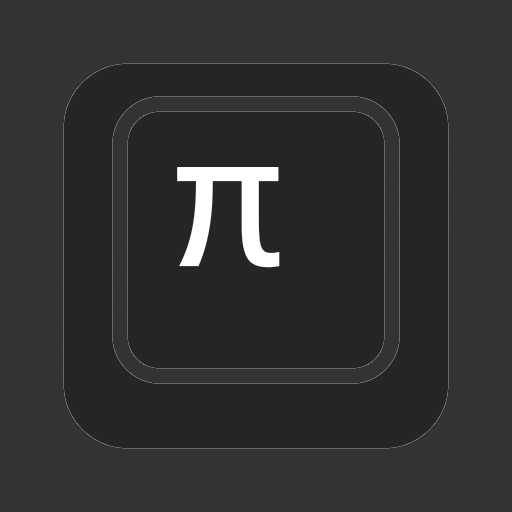
<style>
.page{position:relative;width:512px;height:512px;background:#333333}
.page>*{position:absolute;margin:0}
.t1{font:201.3px "Consolas";letter-spacing:0.02em;color:#ffffff}
</style>
<div class="page">
<p class="t1" style="left:177px;top:167px;width:103px;height:101px">π</p>
</div>
